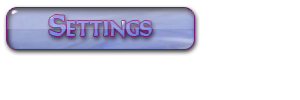
<style>
.page{position:relative;width:300px;height:100px;background:#ffffff}
.page>*{position:absolute;margin:0}
.t1{font:30px "LHFUncialCaps";font-variant:small-caps}
</style>
<div class="page">
<p class="t1" style="left:49px;top:15px;width:103px;height:23px">Settings</p>
</div>
